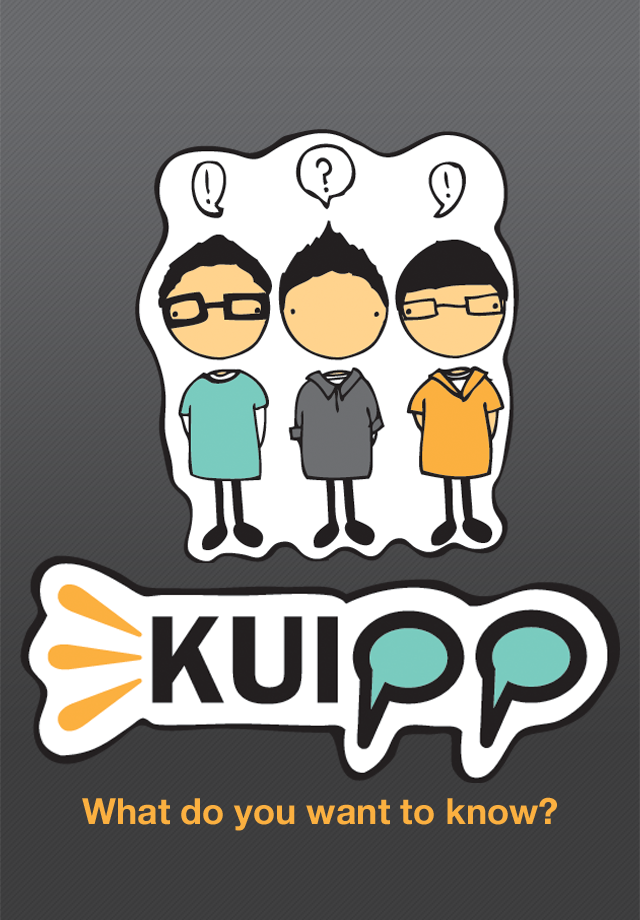
<style>
.page{position:relative;width:640px;height:920px}
.page>*{position:absolute;margin:0}
.t1{font:36px "HelveticaNeue-Bold";color:#fbb040}
</style>
<div class="page">
<p class="t1" style="left:82px;top:797px;width:475px;height:34px">What do you want to know?</p>
</div>
